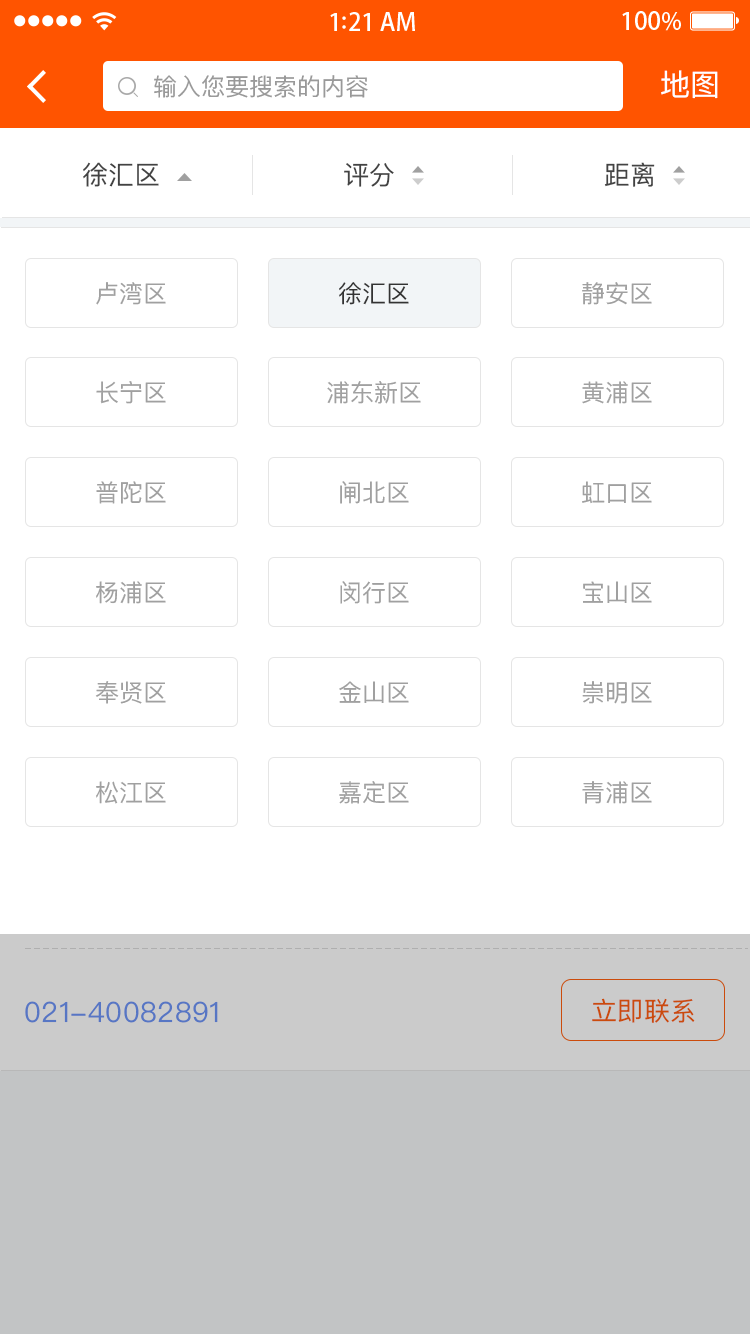
<style>
.page{position:relative;width:750px;height:1334px;background:#ffffff}
.page>*{position:absolute;margin:0}
.t1{font:24px "PingFangSC-Regular";color:#999999}
.t2{font:30px "PingFangSC-Regular";color:#ffffff}
.t3{font:26px "PingFangSC-Regular";color:#434343}
.t4{font:24px "PingFangSC-Regular";color:#a0a0a0}
.t5{font:24px "PingFangSC-Regular";color:#333333}
.t6{font:28px "PingFangSC-Regular";letter-spacing:0.02em;color:#5776c4}
.t7{font:26px "PingFangSC-Regular";letter-spacing:0.02em;color:#cb4b0c}
</style>
<div class="page">
<p class="t1" style="left:154px;top:75px;width:214px;height:23px">输入您要搜索的内容</p>
<p class="t2" style="left:661px;top:70px;width:57px;height:29px">地图</p>
<p class="t3" style="left:83px;top:162px;width:76px;height:25px">徐汇区</p>
<p class="t3" style="left:344px;top:163px;width:50px;height:24px">评分</p>
<p class="t3" style="left:604px;top:162px;width:51px;height:25px">距离</p>
<p class="t4" style="left:96px;top:282px;width:70px;height:23px">卢湾区</p>
<p class="t5" style="left:339px;top:282px;width:70px;height:23px">徐汇区</p>
<p class="t4" style="left:582px;top:282px;width:70px;height:23px">静安区</p>
<p class="t4" style="left:96px;top:381px;width:70px;height:23px">长宁区</p>
<p class="t4" style="left:327px;top:381px;width:94px;height:23px">浦东新区</p>
<p class="t4" style="left:582px;top:381px;width:70px;height:23px">黄浦区</p>
<p class="t4" style="left:96px;top:481px;width:70px;height:23px">普陀区</p>
<p class="t4" style="left:340px;top:481px;width:69px;height:23px">闸北区</p>
<p class="t4" style="left:582px;top:481px;width:70px;height:23px">虹口区</p>
<p class="t4" style="left:96px;top:581px;width:70px;height:23px">杨浦区</p>
<p class="t4" style="left:340px;top:581px;width:69px;height:23px">闵行区</p>
<p class="t4" style="left:583px;top:581px;width:69px;height:22px">宝山区</p>
<p class="t4" style="left:95px;top:681px;width:71px;height:23px">奉贤区</p>
<p class="t4" style="left:339px;top:681px;width:70px;height:22px">金山区</p>
<p class="t4" style="left:582px;top:681px;width:70px;height:23px">崇明区</p>
<p class="t4" style="left:96px;top:781px;width:70px;height:23px">松江区</p>
<p class="t4" style="left:339px;top:781px;width:70px;height:23px">嘉定区</p>
<p class="t4" style="left:582px;top:781px;width:70px;height:23px">青浦区</p>
<p class="t6" style="left:25px;top:1001px;width:193px;height:22px">021-40082891</p>
<p class="t7" style="left:592px;top:998px;width:103px;height:25px">立即联系</p>
</div>
